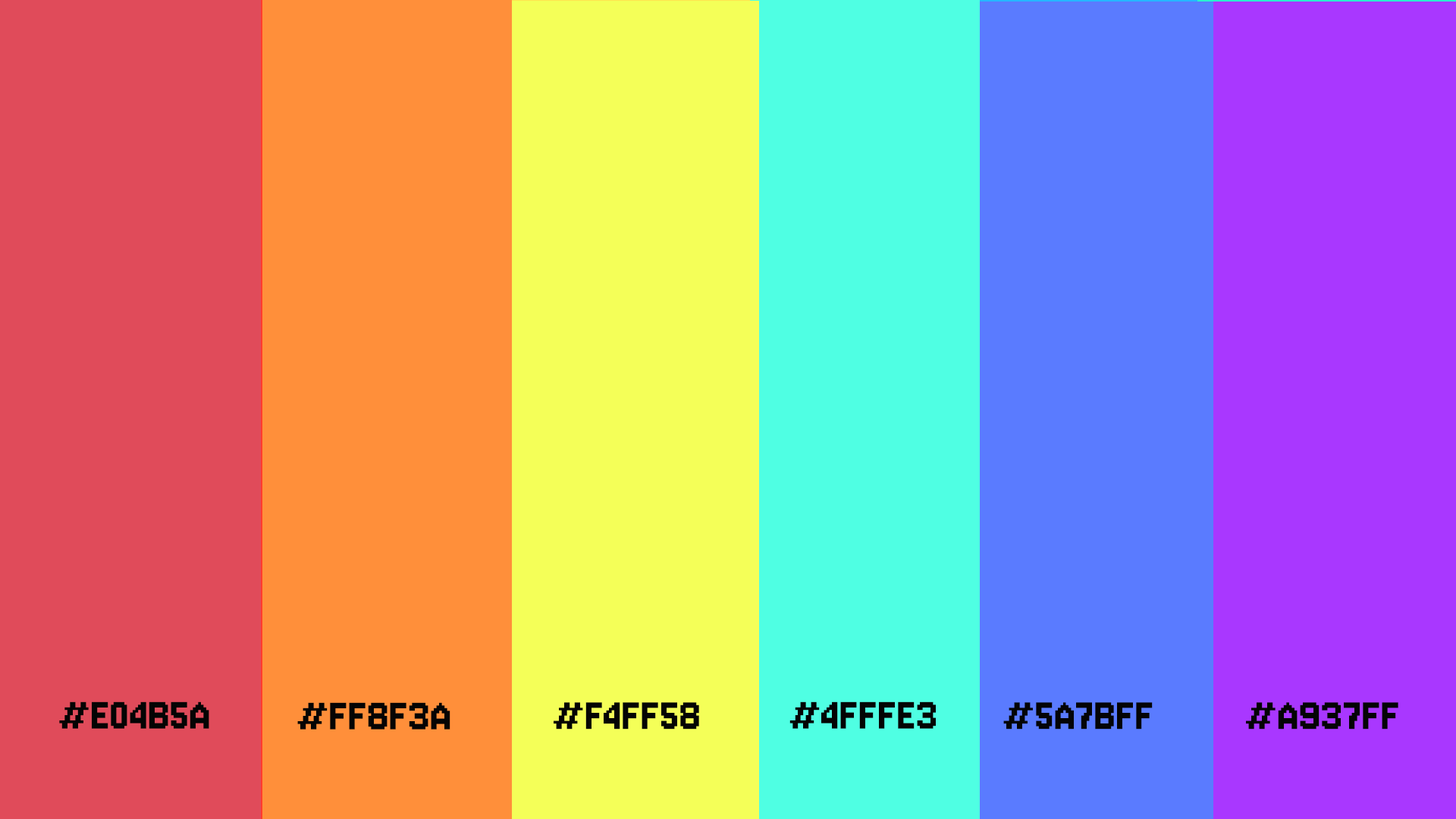
<style>
.page{position:relative;width:1456px;height:819px}
.page>*{position:absolute;margin:0}
.t1{font:49.3px "Jersey10-Regular";letter-spacing:0.025em;color:#040404}
</style>
<div class="page">
<p class="t1" style="left:59px;top:701px;width:150px;height:28px">#E04B5A</p>
<p class="t1" style="left:789px;top:701px;width:147px;height:28px">#4FFFE3</p>
<p class="t1" style="left:297px;top:702px;width:153px;height:28px">#FF8F3A</p>
<p class="t1" style="left:554px;top:702px;width:145px;height:28px">#F4FF58</p>
<p class="t1" style="left:1003px;top:702px;width:150px;height:28px">#5A7BFF</p>
<p class="t1" style="left:1246px;top:702px;width:152px;height:28px">#A937FF</p>
</div>
